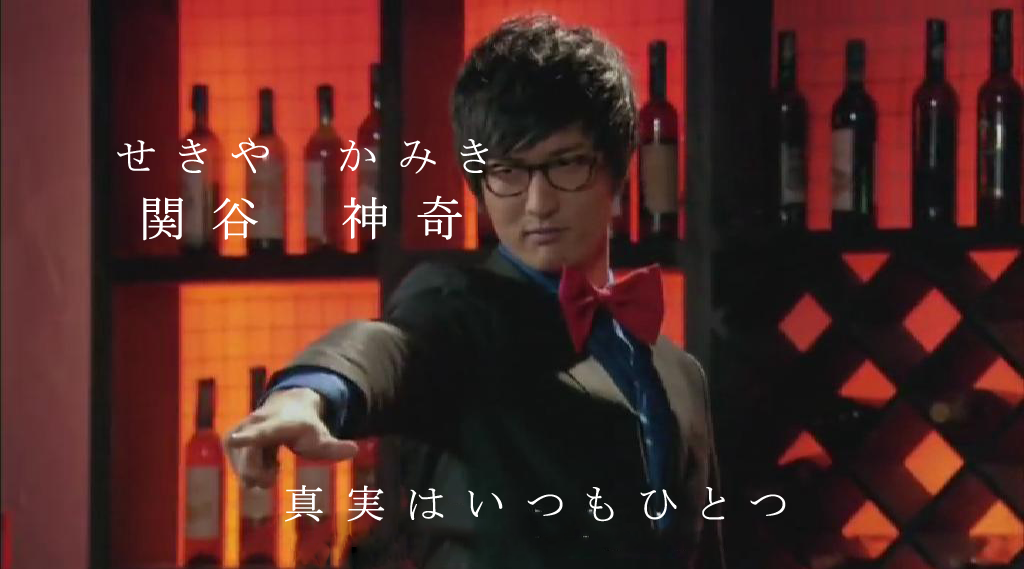
<style>
.page{position:relative;width:1024px;height:569px}
.page>*{position:absolute;margin:0}
.t1{font:40px "MS-PMincho";letter-spacing:0.5em;color:#ffffff;font-weight:bold}
.t2{font:48px "MS-PMincho";letter-spacing:0.5em;color:#ffffff;font-weight:bold}
</style>
<div class="page">
<p class="t1" style="left:117px;top:137px;width:372px;height:37px">せきや　かみき</p>
<p class="t2" style="left:143px;top:195px;width:319px;height:46px">関谷　神奇</p>
<p class="t1" style="left:285px;top:485px;width:501px;height:37px">真実はいつもひとつ</p>
</div>
